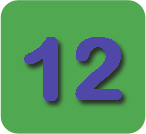
<style>
.page{position:relative;width:146px;height:134px;background:#50a850}
.page>*{position:absolute;margin:0}
.t1{font:86.1px "ArialRoundedMTBold";letter-spacing:-0.01em;color:#4f48a9;font-weight:bold}
</style>
<div class="page">
<p class="t1" style="left:24px;top:37px;width:98px;height:64px">12</p>
</div>
